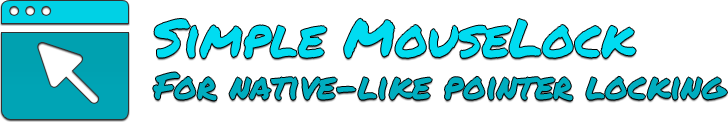
<style>
.page{position:relative;width:728px;height:122px;background:#ffffff}
.page>*{position:absolute;margin:0}
.t1{font:36px/42px "PermanentMarker-Regular";color:#00adbf}
.t2{font:52px/42px "PermanentMarker-Regular";color:#00dcf1}
</style>
<div class="page">
<p class="t1" style="left:153px;top:18px;width:574px;height:83px"><span class="t2">Simple MouseLock<br></span>For native-like pointer locking</p>
</div>
